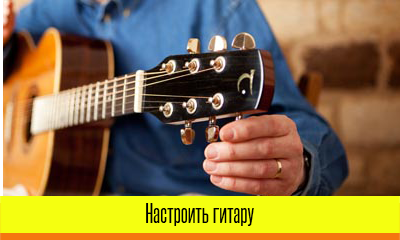
<style>
.page{position:relative;width:400px;height:240px}
.page>*{position:absolute;margin:0}
.t1{font:24px "Steelfish-Regular";color:#000000}
</style>
<div class="page">
<p class="t1" style="left:146px;top:203px;width:108px;height:23px">Настроить гитару</p>
</div>
